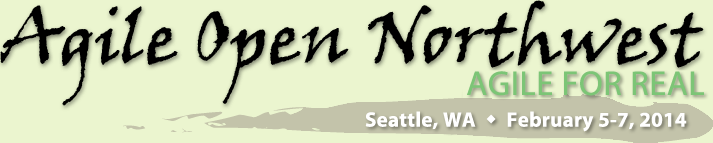
<style>
.page{position:relative;width:713px;height:143px;background:#ebf5cf}
.page>*{position:absolute;margin:0}
.t1{font:34.4px "MyriadPro-Regular";letter-spacing:0.016em;color:#7cc576}
.t2{font:20.9px "MyriadPro-Bold";letter-spacing:0.016em;color:#ffffff}
.t3{font:20.9px "Wingdings-Regular";letter-spacing:0.016em;color:#ffffff}
</style>
<div class="page">
<p class="t1" style="left:467px;top:71px;width:237px;height:25px">AGILE FOR REAL</p>
<p class="t2" style="left:365px;top:111px;width:322px;height:21px">Seattle, WA  <span class="t3">w  </span>February 5-7, 2014</p>
</div>
